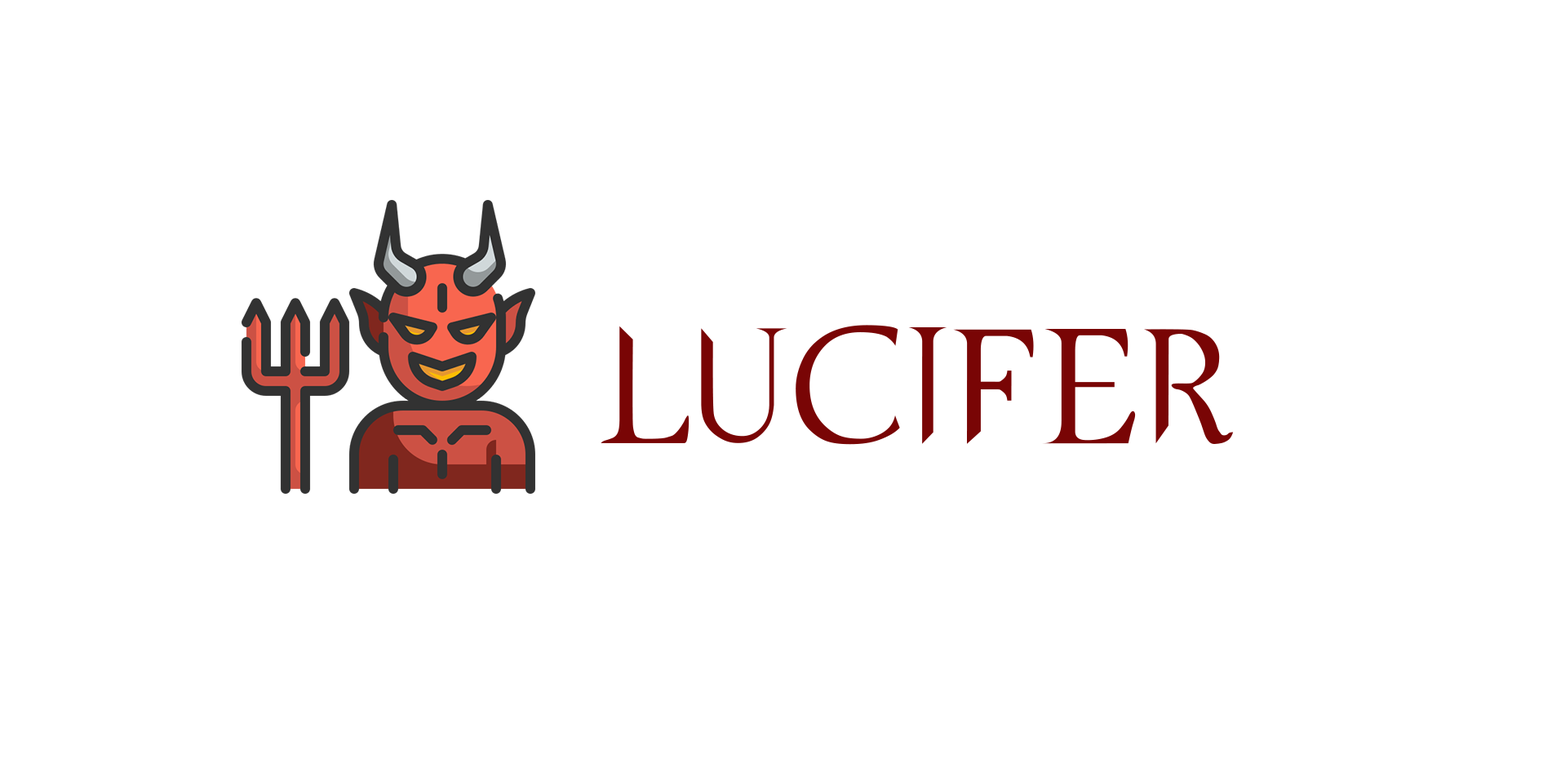
<style>
.page{position:relative;width:1552px;height:768px;background:#ffffff}
.page>*{position:absolute;margin:0}
.t1{font:108.4px "SupernaturalKnight";color:#790505}
</style>
<div class="page">
<p class="t1" style="left:601px;top:325px;width:633px;height:120px">LUCIFER</p>
</div>
